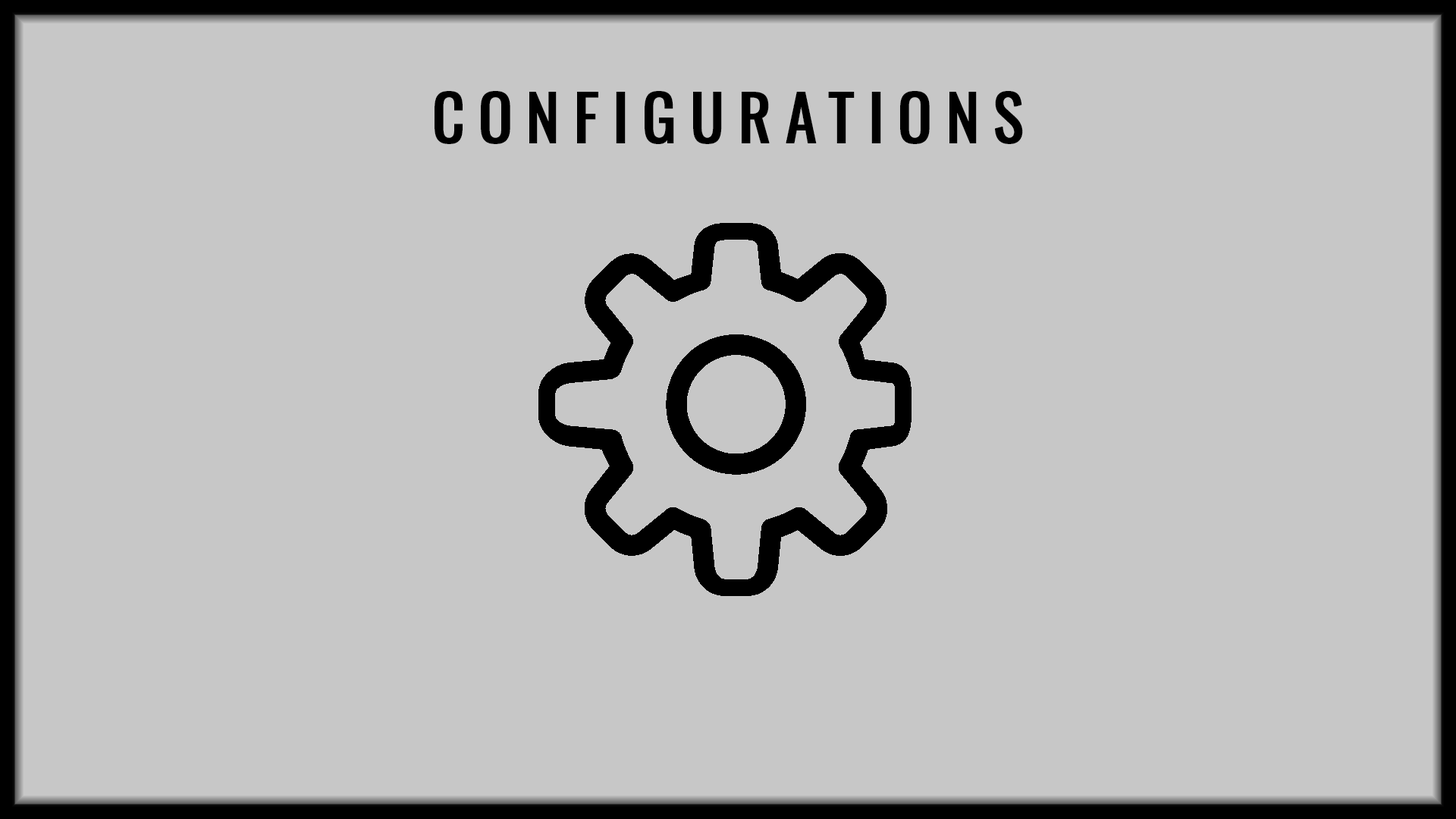
<style>
.page{position:relative;width:1456px;height:819px;background:#c7c7c7}
.page>*{position:absolute;margin:0}
.t1{font:89.6px "Oswald-Regular";letter-spacing:0.2em;color:#000000;font-variant:small-caps;font-weight:bold}
</style>
<div class="page">
<p class="t1" style="left:435px;top:91px;width:588px;height:53px">configurations</p>
</div>
